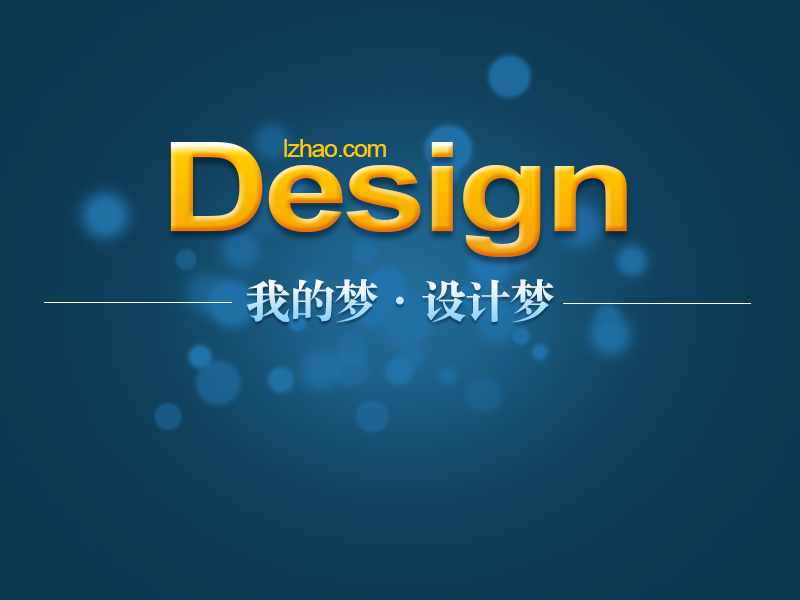
<style>
.page{position:relative;width:800px;height:600px}
.page>*{position:absolute;margin:0}
.t1{font:124.3px "Arial-BoldMT";letter-spacing:-0.04em;scale:1.22 1}
.t2{font:24.5px "ArialMT";letter-spacing:-0.04em;color:#fec900}
.t3{font:45.8px "STSongti-SC-Black";letter-spacing:-0.04em}
</style>
<div class="page">
<p class="t1" style="left:170px;top:142px;width:457px;height:115px">Design</p>
<p class="t2" style="left:284px;top:139px;width:102px;height:18px">lzhao.com</p>
<p class="t3" style="left:246px;top:279px;width:308px;height:44px">我的梦·设计梦</p>
</div>
